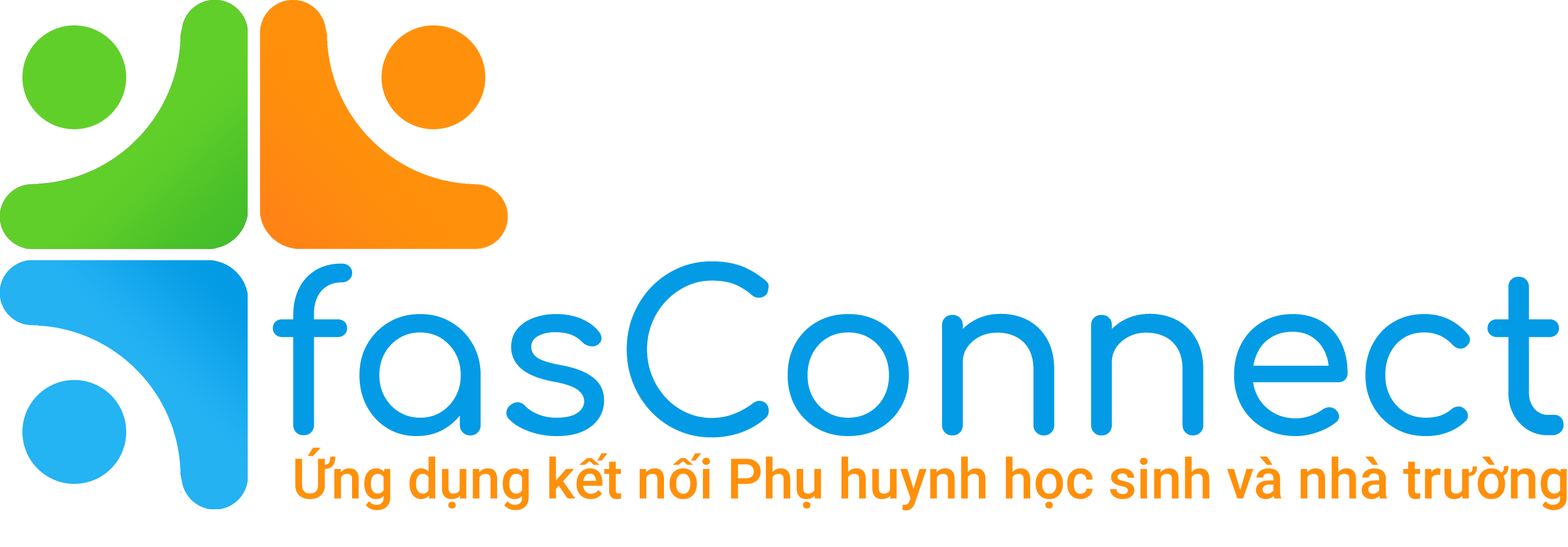
<style>
.page{position:relative;width:1568px;height:547px;background:#ffffff}
.page>*{position:absolute;margin:0}
.t1{font:219.5px "Comfortaa-SemiBold";color:#039be5}
.t2{font:55.8px "Roboto-Medium";color:#ff900b}
</style>
<div class="page">
<p class="t1" style="left:272px;top:261px;width:1292px;height:177px">fasConnect</p>
<p class="t2" style="left:295px;top:447px;width:1272px;height:63px">Ứng dụng kết nối Phụ huynh học sinh và nhà trường</p>
</div>
